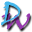
<style>
.page{position:relative;width:32px;height:32px;background:#ffffff}
.page>*{position:absolute;margin:0}
.t1{font:26px "VinerHandITC";color:#46b7ec}
.t2{font:26px "VinerHandITC"}
</style>
<div class="page">
<p class="t1" style="left:1px;top:1px;width:20px;height:24px">D</p>
<p class="t2" style="left:1px;top:13px;width:29px;height:17px">W</p>
</div>
